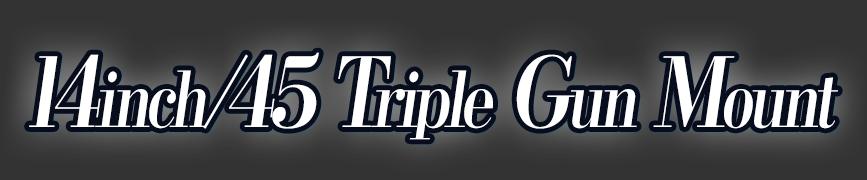
<style>
.page{position:relative;width:867px;height:180px;background:#333333}
.page>*{position:absolute;margin:0}
.t1{font:96px "KochoStd-Heavy";letter-spacing:-0.08em;color:#ffffff;font-style:italic;scale:0.81 1}
.t2{font:76.8px "KochoStd-Heavy";letter-spacing:-0.08em;color:#ffffff;font-style:italic;scale:0.81 1}
</style>
<div class="page">
<p class="t1" style="left:29px;top:52px;width:809px;height:88px">14<span class="t2">inch</span>/45 T<span class="t2">riple</span> G<span class="t2">un</span> M<span class="t2">ount</span></p>
</div>
